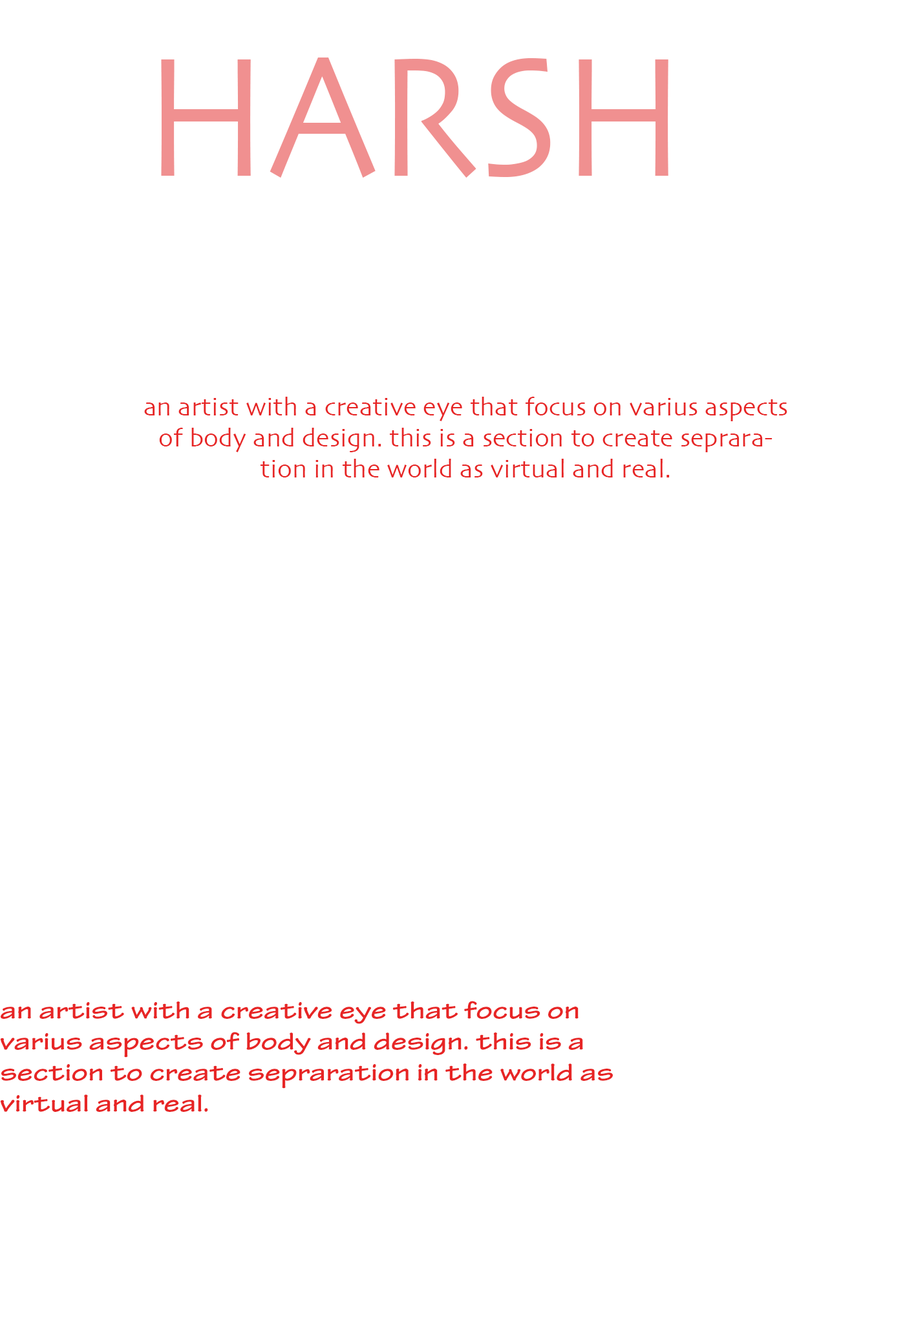
<style>
.page{position:relative;width:905px;height:1318px;background:#ffffff}
.page>*{position:absolute;margin:0}
.t1{font:178.1px "Skia-Regular";color:#f09090;scale:0.91 1}
.t2{font:25.8px "Skia-Regular";color:#e72525}
.t3{font:25.8px "TektonPro-BoldExt";color:#e72525}
</style>
<div class="page">
<p class="t1" style="left:161px;top:58px;width:507px;height:120px">HARSH</p>
<p class="t2" style="left:144px;top:397px;width:643px;height:81px;text-align:center">an artist with a creative eye that focus on varius aspects of body and design. this is a section to create sepraration in the world as virtual and real.</p>
<p class="t3" style="left:0px;top:1001px;width:613px;height:111px">an artist with a creative eye that focus on varius aspects of body and design. this is a section to create sepraration in the world as virtual and real.</p>
</div>
